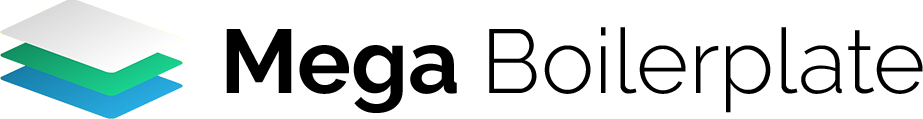
<style>
.page{position:relative;width:923px;height:119px;background:#ffffff}
.page>*{position:absolute;margin:0}
.t1{font:90px "Raleway-Light";color:#000000}
.t2{font:90px "Raleway-Bold";color:#000000}
</style>
<div class="page">
<p class="t1" style="left:226px;top:27px;width:697px;height:86px"><span class="t2">Mega </span>Boilerplate</p>
</div>
